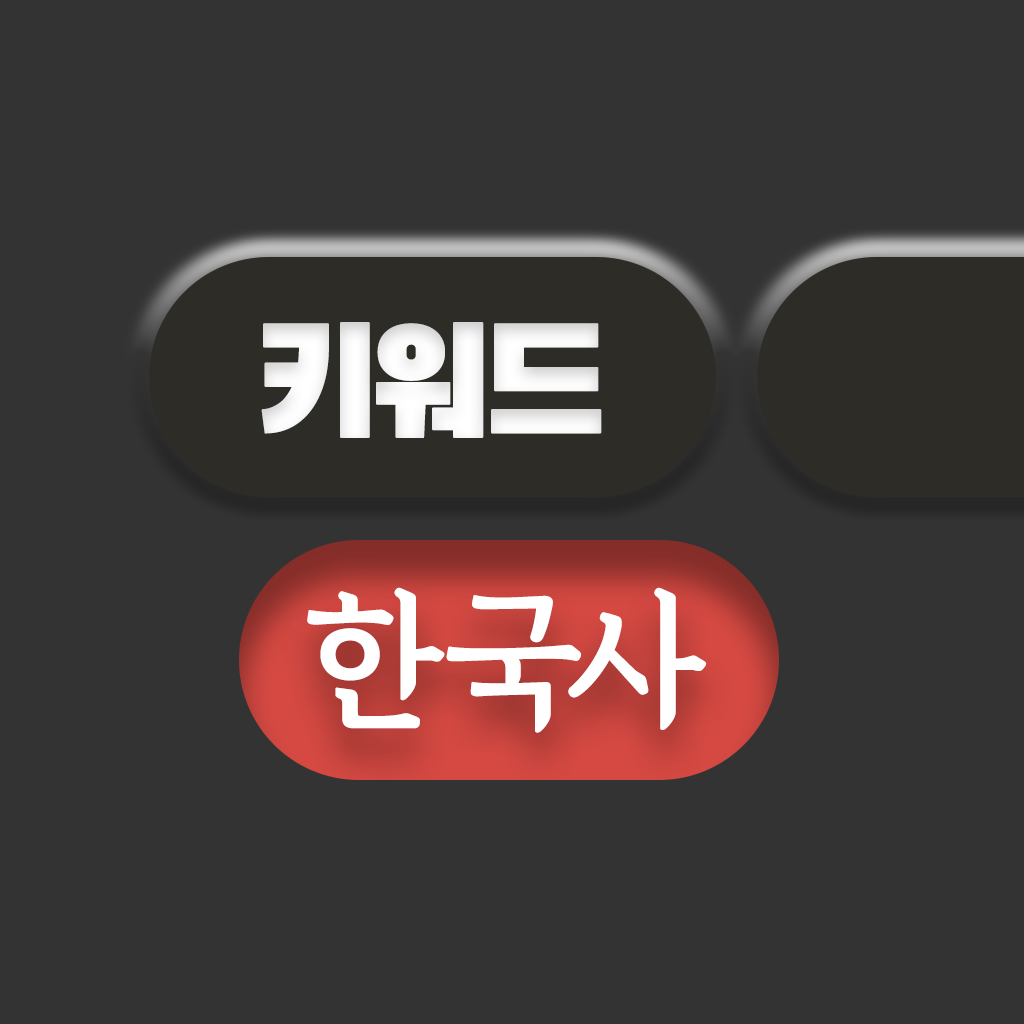
<style>
.page{position:relative;width:1024px;height:1024px;background:#333333}
.page>*{position:absolute;margin:0}
.t1{font:149.9px "BlackHanSans-Regular";letter-spacing:-0.05em;color:#ffffff;font-weight:bold}
.t2{font:145.6px "GyeonggiBatangBOTF";letter-spacing:-0.05em;color:#ffffff;font-weight:bold}
</style>
<div class="page">
<p class="t1" style="left:261px;top:322px;width:341px;height:116px">키워드</p>
<p class="t2" style="left:307px;top:587px;width:400px;height:146px">한국사</p>
</div>
